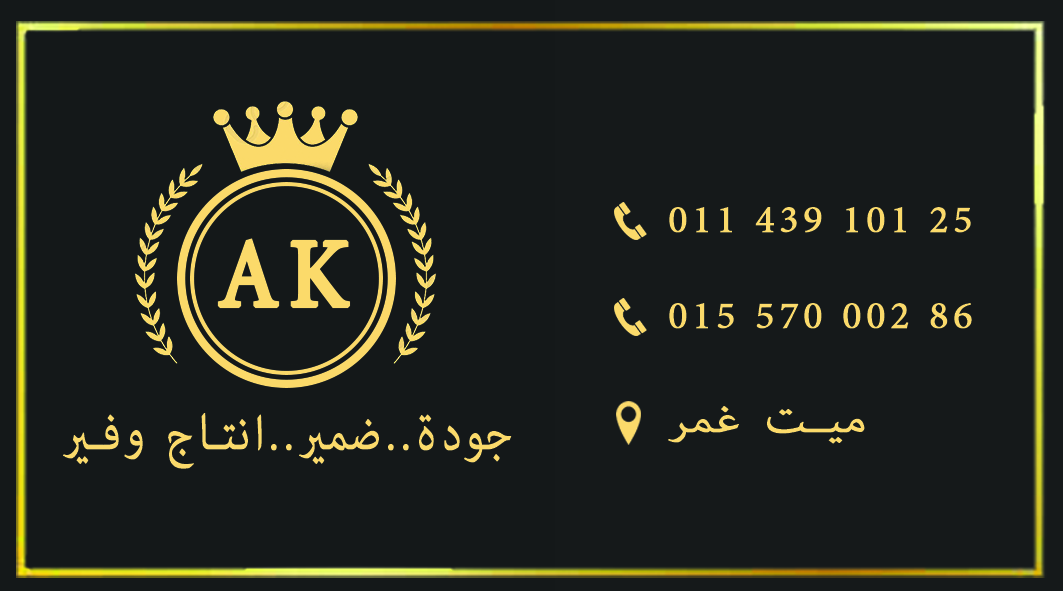
<style>
.page{position:relative;width:1063px;height:591px;background:#15191a}
.page>*{position:absolute;margin:0}
.t1{font:55.5px "AdobeArabic-Regular";letter-spacing:0.075em;color:#fbda6a;font-weight:bold}
.t2{font:139px "AdobeArabic-Regular";letter-spacing:0.075em;color:#fbda6a;font-weight:bold;scale:0.85 1}
.t3{font:70.3px "AdobeArabic-Regular";letter-spacing:0.075em;color:#fbda6a;font-weight:bold;scale:0.84 1}
.t4{font:56.2px "AdobeArabic-Regular";letter-spacing:0.075em;color:#fbda6a;font-weight:bold;scale:1.17 1}
</style>
<div class="page">
<p class="t1" style="left:669px;top:207px;width:302px;height:26px">011 439 101 25</p>
<p class="t2" style="left:217px;top:238px;width:134px;height:71px">AK</p>
<p class="t1" style="left:669px;top:303px;width:303px;height:26px">015 570 002 86</p>
<p class="t3" style="left:63px;top:413px;width:449px;height:56px">جودة..ضمير..انتاج وفير</p>
<p class="t4" style="left:668px;top:406px;width:197px;height:38px">ميت غمر</p>
</div>
